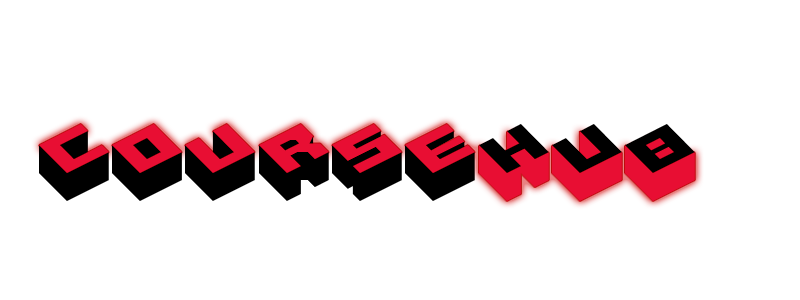
<style>
.page{position:relative;width:800px;height:300px;background:#ffffff}
.page>*{position:absolute;margin:0}
.t1{font:96px "Hexagon";color:#e80e33}
.t2{font:96px "Hexagon";color:#000000}
</style>
<div class="page">
<p class="t1" style="left:39px;top:124px;width:656px;height:77px">COURSEhub</p>
<p class="t2" style="left:39px;top:124px;width:656px;height:77px">courseHUB</p>
</div>
